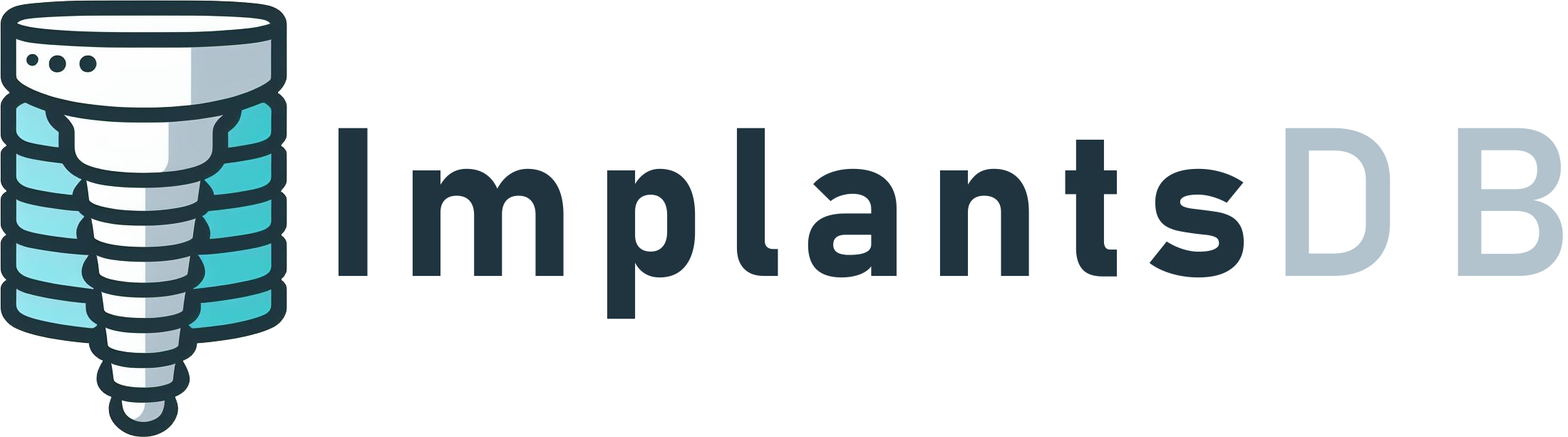
<style>
.page{position:relative;width:1568px;height:437px;background:#ffffff}
.page>*{position:absolute;margin:0}
.t1{font:208.1px "Bahnschrift-Bold";letter-spacing:0.08em;color:#203440}
.t2{font:208.1px "Bahnschrift_550.000wght";letter-spacing:0.18em;color:#b2c3cd}
</style>
<div class="page">
<p class="t1" style="left:338px;top:128px;width:1225px;height:191px">Implants<span class="t2">DB</span></p>
</div>
